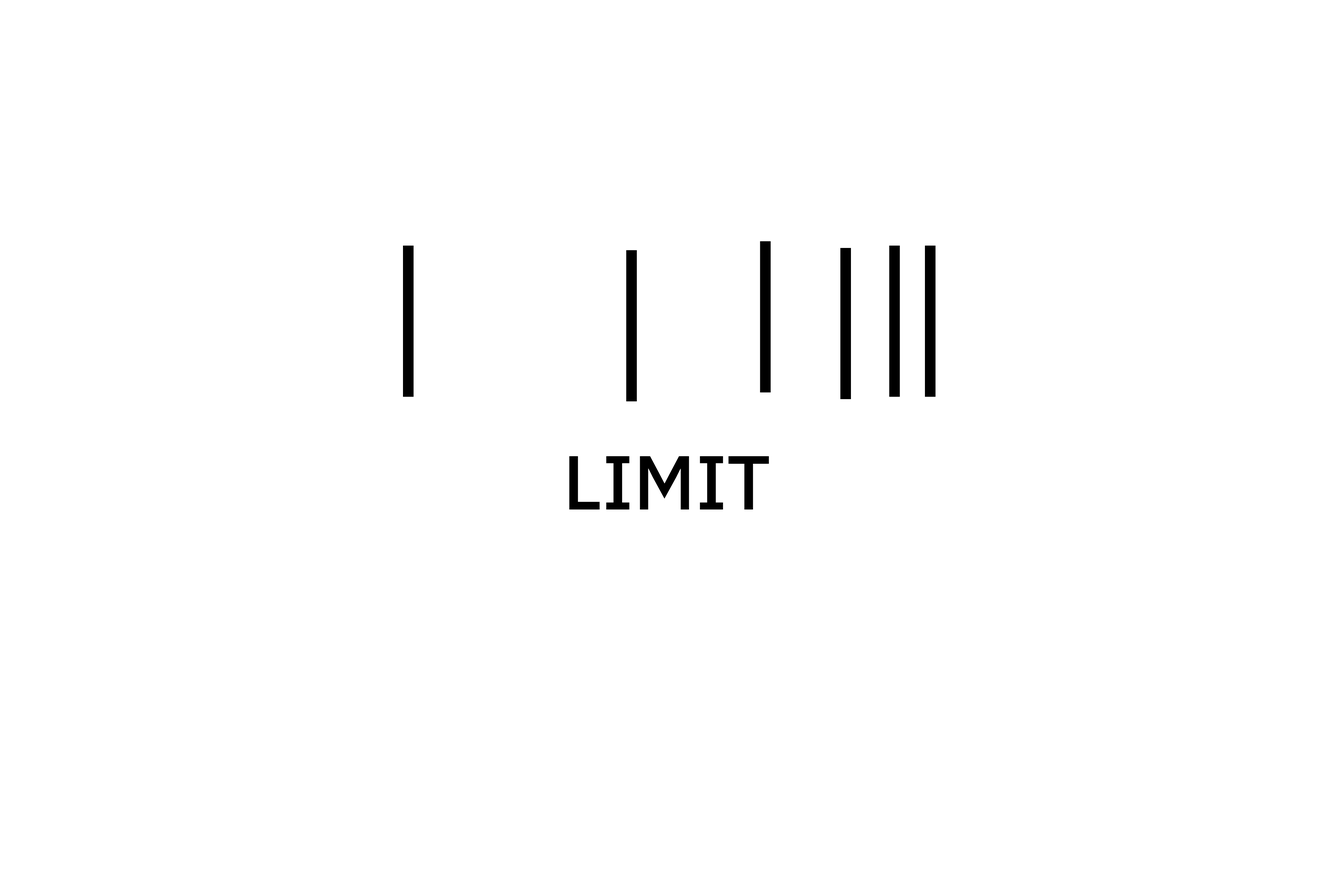
<style>
.page{position:relative;width:1337px;height:892px;background:#ffffff}
.page>*{position:absolute;margin:0}
.t1{font:76.4px "IBMPlexSans-Medium";color:#000000}
</style>
<div class="page">
<p class="t1" style="left:569px;top:456px;width:200px;height:53px">LIMIT</p>
</div>
